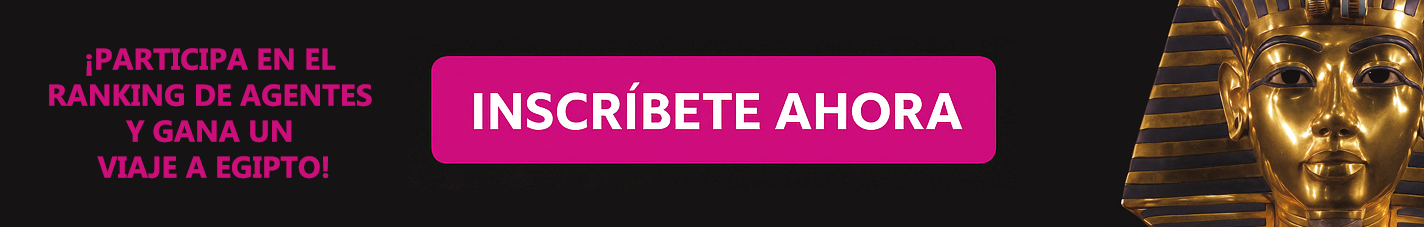
<style>
.page{position:relative;width:1424px;height:227px;background:#161314}
.page>*{position:absolute;margin:0}
.t1{font:30px "Gadugi-Bold";color:#cc0e7b}
</style>
<div class="page">
<p class="t1" style="left:49px;top:48px;width:323px;height:131px;text-align:center">¡PARTICIPA EN EL <br>RANKING DE AGENTES <br>Y GANA UN <br>VIAJE A EGIPTO!</p>
</div>
